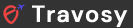
<style>
.page{position:relative;width:133px;height:28px;background:#333333}
.page>*{position:absolute;margin:0}
.t1{font:23.3px "DMSans-Medium";letter-spacing:0.035em;color:#ffffff;font-weight:bold}
</style>
<div class="page">
<p class="t1" style="left:32px;top:5px;width:96px;height:22px">Travosy</p>
</div>
